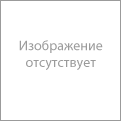
<style>
.page{position:relative;width:121px;height:121px;background:#ffffff}
.page>*{position:absolute;margin:0}
.t1{font:14px "MyriadPro-Regular";color:#9b9b9b}
</style>
<div class="page">
<p class="t1" style="left:19px;top:40px;width:84px;height:30px;text-align:center">Изображение<br>отсутствует</p>
</div>
